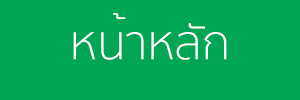
<style>
.page{position:relative;width:300px;height:100px;background:#00a653}
.page>*{position:absolute;margin:0}
.t1{font:48px "SukhumvitSet-Thin";color:#fefefe}
</style>
<div class="page">
<p class="t1" style="left:73px;top:13px;width:154px;height:47px">หน้าหลัก</p>
</div>
